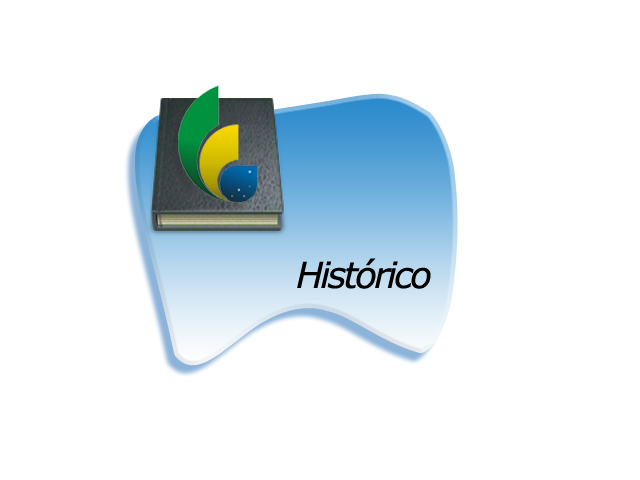
<style>
.page{position:relative;width:640px;height:480px;background:#ffffff}
.page>*{position:absolute;margin:0}
.t1{font:36px "Verdana-Italic";letter-spacing:-0.075em;color:#000000}
</style>
<div class="page">
<p class="t1" style="left:297px;top:258px;width:134px;height:31px">Histórico</p>
</div>
